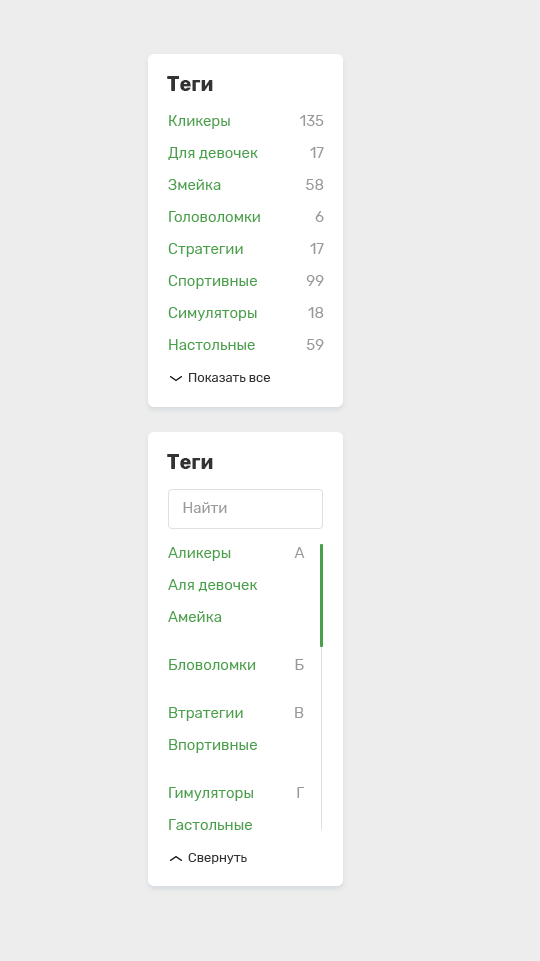
<style>
.page{position:relative;width:540px;height:961px;background:#ededed}
.page>*{position:absolute;margin:0}
.t1{font:20px "Rubik-Bold";color:#333333}
.t2{font:15px "Rubik-Regular";color:#46a148}
.t3{font:13px "Rubik-Regular";color:#333333}
.t4{font:15px "Rubik-Regular";color:#999999}
</style>
<div class="page">
<p class="t1" style="left:167px;top:76px;width:46px;height:15px">Теги</p>
<p class="t2" style="left:168px;top:115px;width:102px;height:267px">Кликеры<br>Для девочек<br>Змейка<br>Головоломки<br>Стратегии<br>Спортивные <br>Симуляторы  <br>Настольные <br><span class="t3">Показать все</span></p>
<p class="t4" style="left:300px;top:115px;width:24px;height:235px;text-align:right">135<br>17<br>58<br>6<br>17<br>99<br>18<br>59</p>
<p class="t1" style="left:167px;top:454px;width:46px;height:15px">Теги</p>
<p class="t4" style="left:183px;top:502px;width:44px;height:11px">Найти</p>
<p class="t2" style="left:168px;top:547px;width:90px;height:317px">Aликеры<br>Aля девочек<br>Aмейка<br>Бловоломки<br>Втратегии<br>Впортивные <br>Гимуляторы  <br>Гастольные <br><span class="t3">Cвернуть</span></p>
<p class="t4" style="left:294px;top:547px;width:11px;height:11px">A</p>
<p class="t4" style="left:295px;top:659px;width:9px;height:11px">Б</p>
<p class="t4" style="left:295px;top:707px;width:9px;height:11px">В</p>
<p class="t4" style="left:297px;top:787px;width:8px;height:11px">Г</p>
</div>
